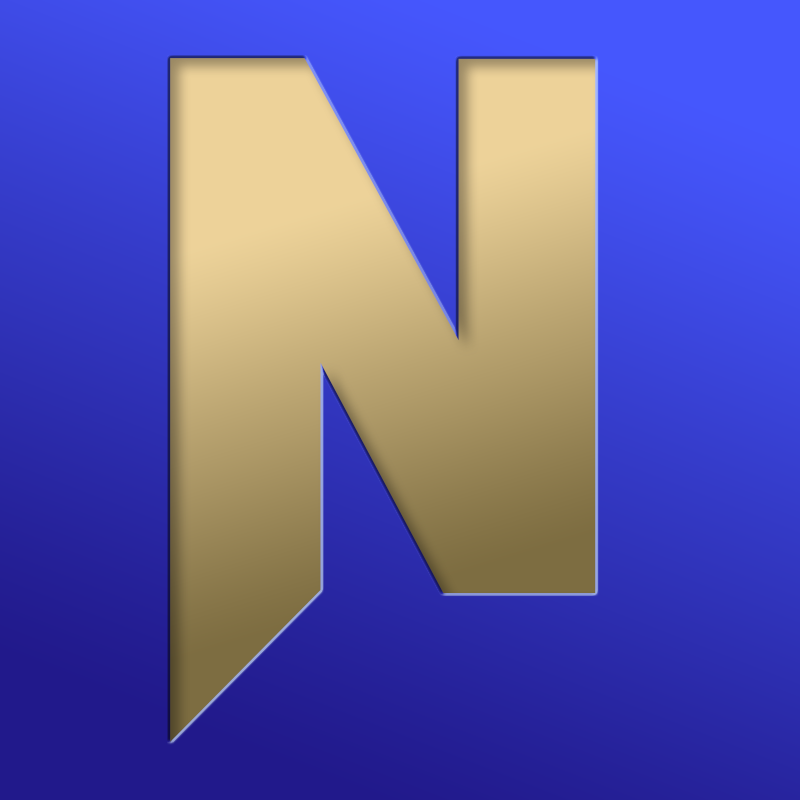
<style>
.page{position:relative;width:800px;height:800px}
.page>*{position:absolute;margin:0}
.t1{font:762.5px "Arwing";letter-spacing:0.1em}
</style>
<div class="page">
<p class="t1" style="left:170px;top:58px;width:426px;height:684px">N</p>
</div>
